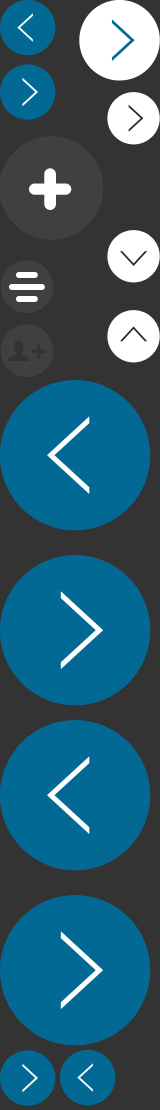
<style>
.page{position:relative;width:160px;height:1110px;background:#026995}
.page>*{position:absolute;margin:0}
.t1{font:81.9px "GothamRounded-Bold";letter-spacing:-0.03em;color:#ffffff}
</style>
<div class="page">
<p class="t1" style="left:29px;top:168px;width:43px;height:42px">+</p>
</div>
